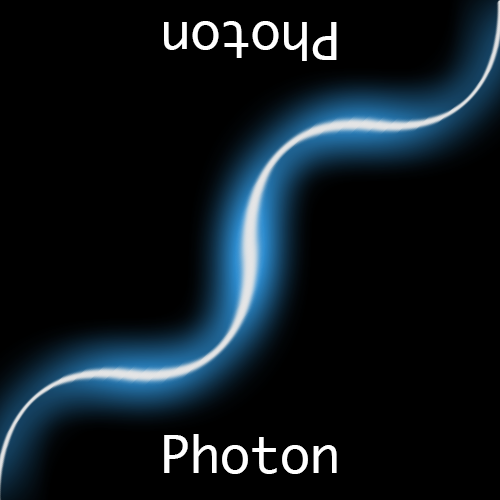
<style>
.page{position:relative;width:500px;height:500px;background:#000000}
.page>*{position:absolute;margin:0}
.t1{font:50px "Ayuthaya";color:#ffffff}
</style>
<div class="page">
<p class="t1" style="left:164px;top:21px;width:173px;height:40px;rotate:180deg">Photon</p>
<p class="t1" style="left:164px;top:434px;width:173px;height:40px">Photon</p>
</div>
